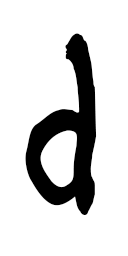
<style>
.page{position:relative;width:128px;height:256px;background:#ffffff}
.page>*{position:absolute;margin:0}
.t1{font:250px "AB-fudeshichi";letter-spacing:0.42em;color:#000000;scale:0.7 1}
</style>
<div class="page">
<p class="t1" style="left:25px;top:33px;width:72px;height:182px">d</p>
</div>
